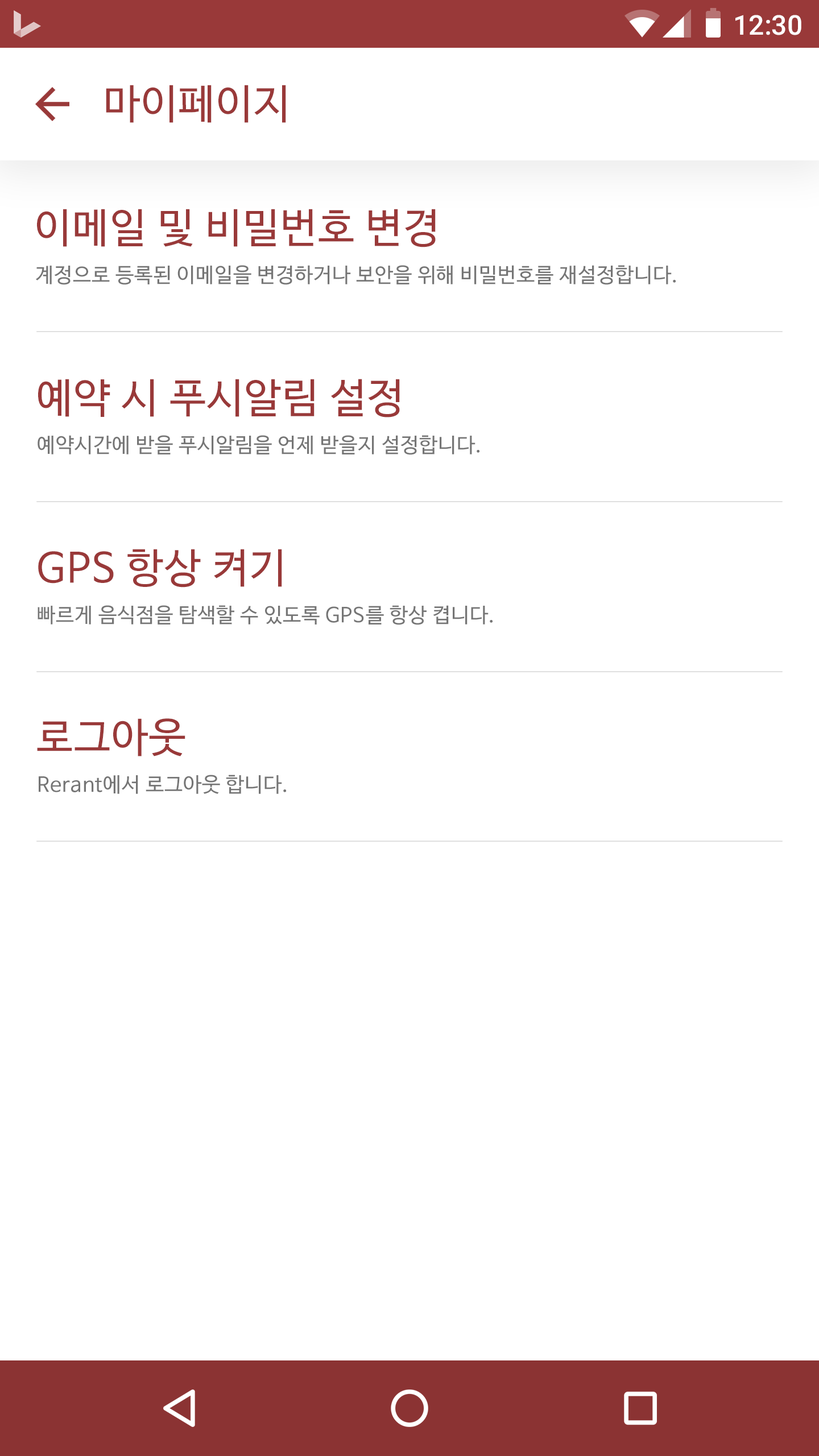
<style>
.page{position:relative;width:819px;height:1456px;background:#ffffff}
.page>*{position:absolute;margin:0}
.t1{font:27.3px "Roboto-Medium";color:#ffffff}
.t2{font:40.9px "NanumBarunGothic";letter-spacing:0.025em;color:#993939}
.t3{font:20.5px "NanumBarunGothic";letter-spacing:0.025em;color:#757575}
</style>
<div class="page">
<p class="t1" style="left:735px;top:15px;width:66px;height:20px">12:30</p>
<p class="t2" style="left:106px;top:85px;width:180px;height:38px">마이페이지</p>
<p class="t2" style="left:37px;top:209px;width:399px;height:38px">이메일 및 비밀번호 변경</p>
<p class="t3" style="left:36px;top:265px;width:640px;height:20px">계정으로 등록된 이메일을 변경하거나 보안을 위해 비밀번호를 재설정합니다.</p>
<p class="t2" style="left:38px;top:379px;width:362px;height:38px">예약 시 푸시알림 설정</p>
<p class="t3" style="left:38px;top:435px;width:442px;height:20px">예약시간에 받을 푸시알림을 언제 받을지 설정합니다.</p>
<p class="t2" style="left:38px;top:549px;width:244px;height:39px">GPS 항상 켜기</p>
<p class="t3" style="left:38px;top:605px;width:455px;height:20px">빠르게 음식점을 탐색할 수 있도록 GPS를 항상 켭니다.</p>
<p class="t2" style="left:37px;top:718px;width:148px;height:38px">로그아웃</p>
<p class="t3" style="left:39px;top:775px;width:248px;height:19px">Rerant에서 로그아웃 합니다.</p>
</div>
